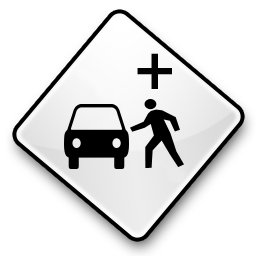
<style>
.page{position:relative;width:256px;height:256px;background:#ffffff}
.page>*{position:absolute;margin:0}
.t1{font:66px "MyriadPro-Bold";letter-spacing:0.005em;color:#020202}
</style>
<div class="page">
<p class="t1" style="left:137px;top:53px;width:35px;height:36px">+</p>
</div>
